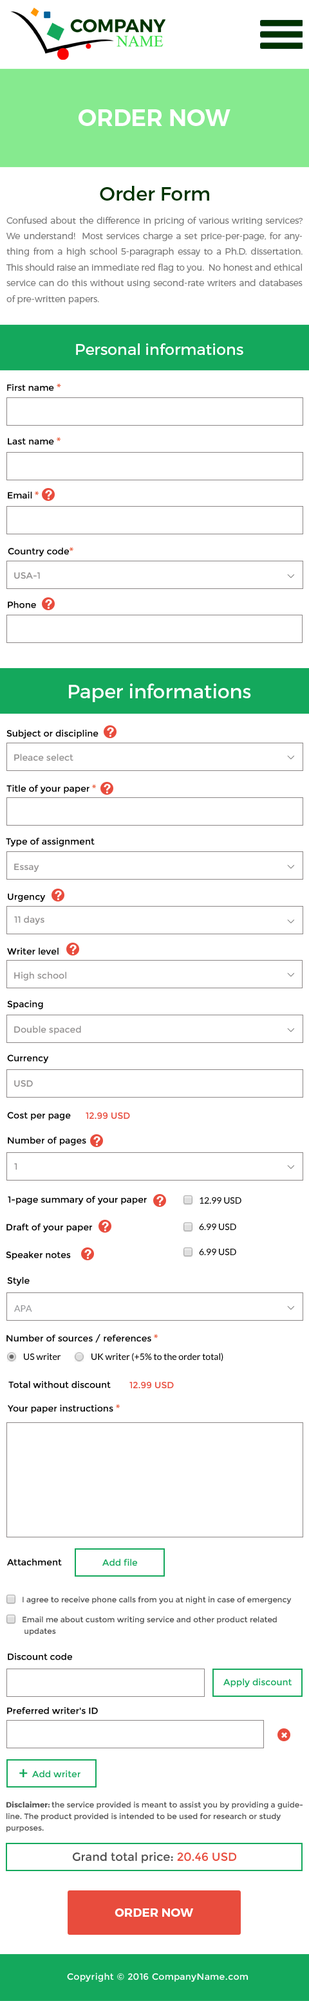
<style>
.page{position:relative;width:309px;height:2001px;background:#ffffff}
.page>*{position:absolute;margin:0}
.t1{font:23.1px "Montserrat-SemiBold";color:#ffffff;text-transform:uppercase}
.t2{font:19.3px "Montserrat-Regular";color:#003300}
.t3{font:8.8px/15.7px "Montserrat-Light";color:#777777}
.t4{font:15.4px "Montserrat-Regular";color:#ffffff}
.t5{font:9px "Montserrat-Regular";color:#000000}
.t6{font:10.3px "MyriadPro-Regular";color:#e33006}
.t7{font:9px "Montserrat-Regular";color:#939191}
.t8{font:19.3px "Montserrat-Regular";color:#ffffff}
.t9{font:9px "Montserrat-Regular";color:#e84c3d}
.t10{font:9px "Lato-Regular";color:#000000}
.t11{font:9px "Lato-Regular";color:#919396}
.t12{font:9px "Montserrat-Regular";color:#14a85c}
.t13{font:7.7px "Montserrat-Regular";color:#4e4e4e}
.t14{font:7.7px/11.6px "Montserrat-Regular";color:#4e4e4e}
.t15{font:16.1px "Lato-Bold";color:#14a85c}
.t16{font:7.7px/11.6px "Montserrat-Bold";color:#4e4e4e}
.t17{font:11.6px "Montserrat-Regular";color:#4e4e4e}
.t18{font:11.6px "Montserrat-Regular";color:#e84c3d}
.t19{font:11.9px "Montserrat-Bold";color:#ffffff;text-transform:uppercase}
.t20{font:9px "Montserrat-Regular";letter-spacing:0.025em;color:#ffffff}
</style>
<div class="page">
<p class="t1" style="left:78px;top:109px;width:152px;height:17px">Order now</p>
<p class="t2" style="left:100px;top:186px;width:109px;height:15px">Order Form</p>
<p class="t3" style="left:6px;top:217px;width:296px;height:87px;text-align:justify">Confused about the difference in pricing of various writing services? We understand!  Most services charge a set price-per-page, for anything from a high school 5-paragraph essay to a Ph.D. dissertation. This should raise an immediate red flag to you.  No honest and ethical service can do this without using second-rate writers and databases of pre-written papers.</p>
<p class="t4" style="left:76px;top:343px;width:167px;height:12px">Personal informations</p>
<p class="t5" style="left:7px;top:383px;width:54px;height:8px">First name <span class="t6">*</span></p>
<p class="t5" style="left:8px;top:437px;width:52px;height:8px">Last name <span class="t6">*</span></p>
<p class="t5" style="left:8px;top:491px;width:31px;height:8px">Email <span class="t6">*</span></p>
<p class="t5" style="left:8px;top:547px;width:65px;height:10px">Country code<span class="t6">*</span></p>
<p class="t7" style="left:14px;top:572px;width:26px;height:7px">USA-1</p>
<p class="t5" style="left:8px;top:601px;width:28px;height:7px">Phone</p>
<p class="t8" style="left:69px;top:683px;width:182px;height:19px">Paper informations</p>
<p class="t5" style="left:6px;top:729px;width:92px;height:10px">Subject or discipline</p>
<p class="t7" style="left:14px;top:753px;width:59px;height:7px">Pleace select</p>
<p class="t5" style="left:6px;top:784px;width:90px;height:10px">Title of your paper <span class="t6">*</span></p>
<p class="t5" style="left:6px;top:837px;width:88px;height:10px">Type of assignment</p>
<p class="t7" style="left:14px;top:863px;width:25px;height:9px">Essay</p>
<p class="t5" style="left:8px;top:893px;width:38px;height:9px">Urgency</p>
<p class="t7" style="left:14px;top:915px;width:30px;height:9px">11 days</p>
<p class="t5" style="left:7px;top:947px;width:52px;height:8px">Writer level</p>
<p class="t7" style="left:14px;top:971px;width:52px;height:9px">High school</p>
<p class="t5" style="left:7px;top:1000px;width:36px;height:9px">Spacing</p>
<p class="t7" style="left:14px;top:1025px;width:67px;height:9px">Double spaced</p>
<p class="t5" style="left:7px;top:1054px;width:42px;height:9px">Currency</p>
<p class="t7" style="left:14px;top:1080px;width:19px;height:6px">USD</p>
<p class="t5" style="left:7px;top:1112px;width:64px;height:8px">Cost per page</p>
<p class="t9" style="left:86px;top:1112px;width:44px;height:7px">12.99 USD</p>
<p class="t5" style="left:8px;top:1137px;width:78px;height:9px">Number of pages</p>
<p class="t7" style="left:14px;top:1163px;width:3px;height:6px">1</p>
<p class="t5" style="left:8px;top:1196px;width:139px;height:9px">1-page summary of your paper</p>
<p class="t10" style="left:199px;top:1197px;width:42px;height:6px">12.99 USD</p>
<p class="t5" style="left:6px;top:1223px;width:87px;height:9px">Draft of your paper</p>
<p class="t10" style="left:199px;top:1223px;width:37px;height:7px">6.99 USD</p>
<p class="t5" style="left:6px;top:1251px;width:65px;height:9px">Speaker notes</p>
<p class="t10" style="left:199px;top:1248px;width:37px;height:7px">6.99 USD</p>
<p class="t5" style="left:7px;top:1277px;width:23px;height:9px">Style</p>
<p class="t11" style="left:14px;top:1305px;width:18px;height:6px">APA</p>
<p class="t5" style="left:6px;top:1334px;width:152px;height:8px">Number of sources / references <span class="t6">*</span></p>
<p class="t10" style="left:24px;top:1353px;width:36px;height:7px">US writer</p>
<p class="t10" style="left:91px;top:1353px;width:132px;height:8px">UK writer (+5% to the order total)</p>
<p class="t5" style="left:8px;top:1380px;width:103px;height:8px">Total without discount</p>
<p class="t9" style="left:129px;top:1382px;width:45px;height:6px">12.99 USD</p>
<p class="t5" style="left:8px;top:1404px;width:112px;height:9px">Your paper instructions <span class="t6">*</span></p>
<p class="t5" style="left:7px;top:1558px;width:55px;height:7px">Attachment</p>
<p class="t12" style="left:102px;top:1558px;width:35px;height:7px">Add file</p>
<p class="t13" style="left:22px;top:1596px;width:269px;height:8px">I agree to receive phone calls from you at night in case of emergency</p>
<p class="t14" style="left:22px;top:1616px;width:254px;height:19px">Email me about custom writing service and other product related <br> updates</p>
<p class="t5" style="left:8px;top:1652px;width:64px;height:8px">Discount code</p>
<p class="t12" style="left:223px;top:1678px;width:69px;height:9px">Apply discount</p>
<p class="t5" style="left:7px;top:1706px;width:91px;height:8px">Preferred writer's ID</p>
<p class="t15" style="left:19px;top:1769px;width:9px;height:8px">+</p>
<p class="t12" style="left:32px;top:1770px;width:48px;height:7px">Add writer</p>
<p class="t14" style="left:6px;top:1801px;width:296px;height:31px"><span class="t16">Disclaimer: </span>the service provided is meant to assist you by providing a guideline. The product provided is intended to be used for research or study purposes.</p>
<p class="t17" style="left:73px;top:1851px;width:163px;height:12px">Grand total price: <span class="t18">20.46 USD</span></p>
<p class="t19" style="left:114px;top:1908px;width:80px;height:8px">Order NOW</p>
<p class="t20" style="left:67px;top:1972px;width:181px;height:10px">Copyright © 2016 CompanyName.com</p>
</div>
